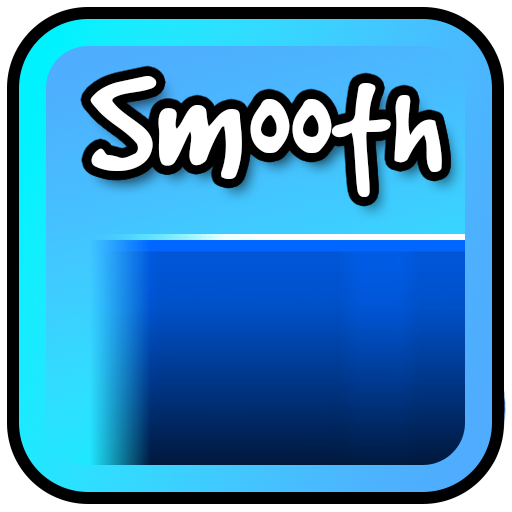
<style>
.page{position:relative;width:512px;height:512px}
.page>*{position:absolute;margin:0}
.t1{font:150px "GoodDogPlain";color:#ffffff}
</style>
<div class="page">
<p class="t1" style="left:90px;top:76px;width:352px;height:121px">Smooth</p>
</div>
